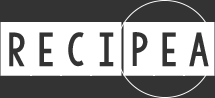
<style>
.page{position:relative;width:215px;height:98px;background:#333333}
.page>*{position:absolute;margin:0}
.t1{font:72px "KGDefyingGravity";color:#ffffff}
</style>
<div class="page">
<p class="t1" style="left:0px;top:22px;width:215px;height:54px">Reci Pea</p>
</div>
